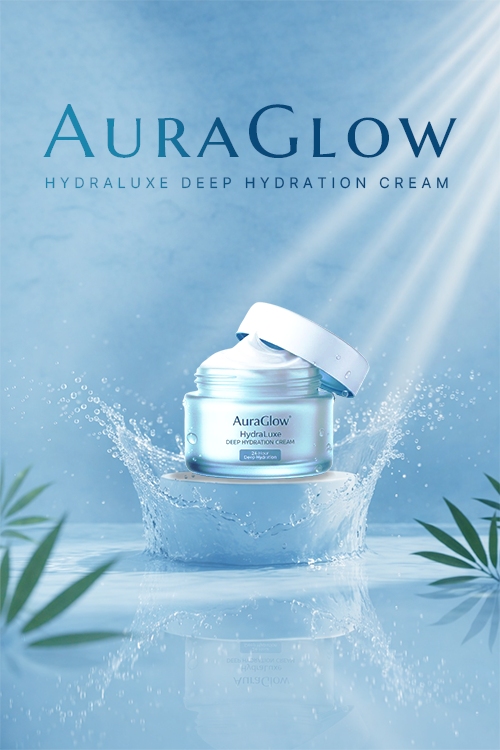
<style>
.page{position:relative;width:500px;height:750px}
.page>*{position:absolute;margin:0}
.t1{font:74px "MarcellusSC-Regular";letter-spacing:0.1em;color:#074777}
.t2{font:15px "Pretendard-Regular";letter-spacing:0.3em;text-transform:uppercase}
</style>
<div class="page">
<p class="t1" style="left:43px;top:104px;width:414px;height:54px">AuraGlow</p>
<p class="t2" style="left:45px;top:177px;width:403px;height:12px">HydraLuxe Deep Hydration Cream</p>
</div>
